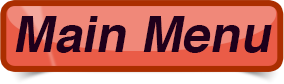
<style>
.page{position:relative;width:284px;height:84px;background:#f08879}
.page>*{position:absolute;margin:0}
.t1{font:50px "Helvetica-Bold";color:#1f001b;font-style:italic}
</style>
<div class="page">
<p class="t1" style="left:15px;top:16px;width:257px;height:37px">Main Menu</p>
</div>
